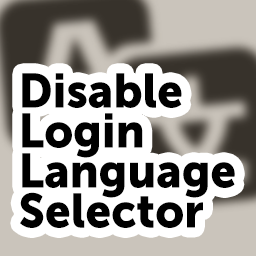
<style>
.page{position:relative;width:256px;height:256px;background:#ffffff}
.page>*{position:absolute;margin:0}
.t1{font:48px/40px "MuseoSans-900";color:#000000;scale:0.95 1}
</style>
<div class="page">
<p class="t1" style="left:20px;top:73px;width:215px;height:155px">Disable <br>Login <br>Language <br>Selector</p>
</div>
